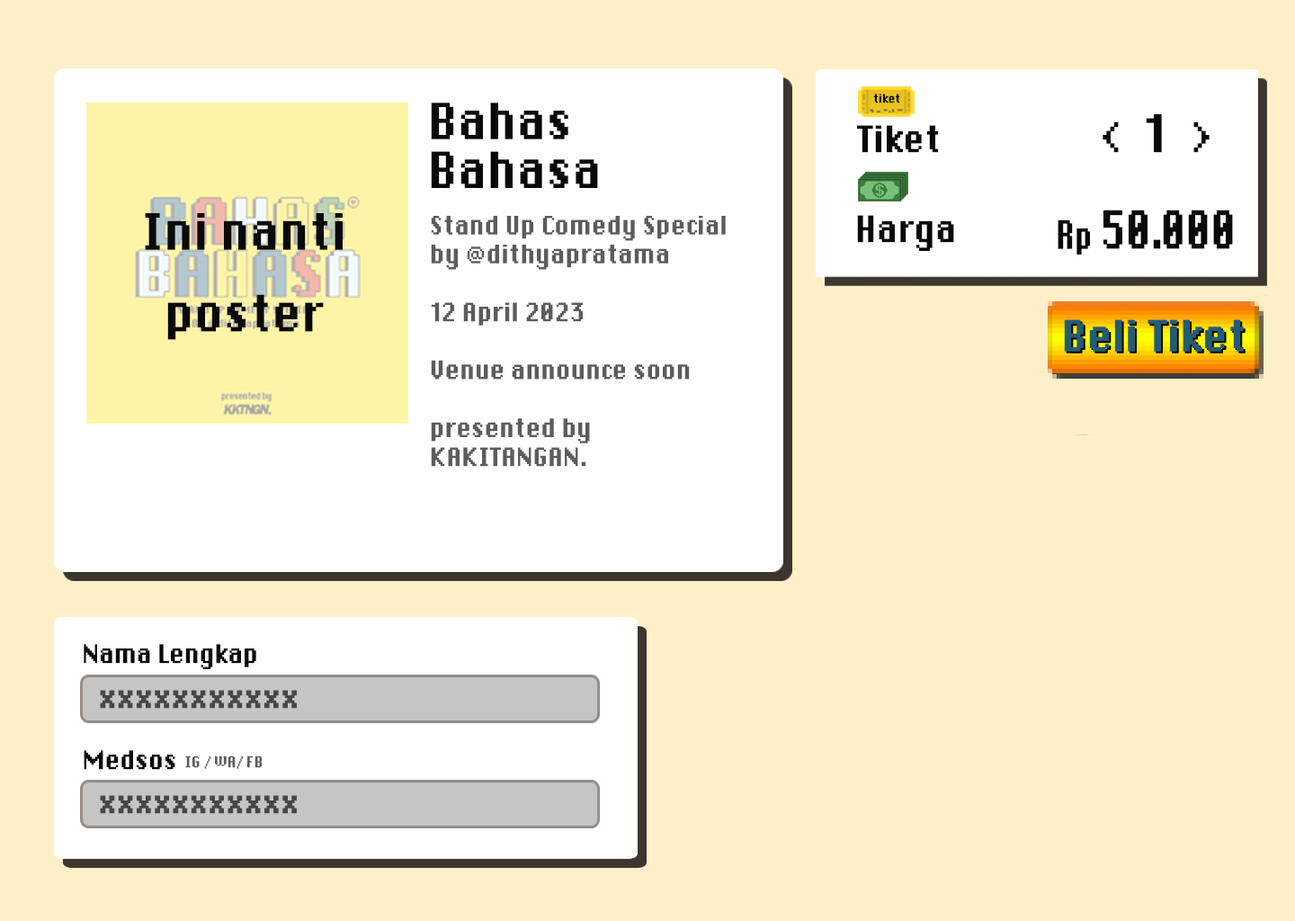
<style>
.page{position:relative;width:1295px;height:921px;background:#ffefc9}
.page>*{position:absolute;margin:0}
.t1{font:8.3px "DePixel-Bold";color:#090909;font-weight:bold;scale:0.9 1}
.t2{font:35.5px/48.8px "DePixel-Bold";color:#090909;font-weight:bold;scale:0.89 1}
.t3{font:36.9px "DePixel-Bold";color:#090909;font-weight:bold;scale:0.89 1}
.t4{font:25.7px "DePixel-Bold";color:#090909;font-weight:bold;scale:0.89 1}
.t5{font:36.8px "DePixel-Bold";color:#090909;font-weight:bold;scale:0.73 1}
.t6{font:27.6px "DePixel-Bold";color:#090909;font-weight:bold;scale:0.73 1}
.t7{font:25.2px "DePixel-Bold";color:#090909;font-weight:bold;scale:0.73 1}
.t8{font:35.5px/81.5px "DePixel-Bold";color:#090909;font-weight:bold;scale:0.89 1}
.t9{font:18px/28.9px "DePixel-Bold";color:#5c5c5c;font-weight:bold;scale:0.89 1}
.t10{font:30.1px "DePixel-Bold";color:#245c73;font-weight:bold;scale:0.9 1}
.t11{font:18.2px "DePixel-Bold";color:#090909;font-weight:bold;scale:0.89 1}
.t12{font:21.9px "DePixel-Bold";color:#474747;font-weight:bold;scale:0.89 1}
.t13{font:10.7px "DePixel-Bold";color:#5c5c5c;font-weight:bold;scale:0.89 1}
</style>
<div class="page">
<p class="t1" style="left:873px;top:94px;width:27px;height:9px">tiket</p>
<p class="t2" style="left:431px;top:103px;width:167px;height:85px">Bahas<br>Bahasa</p>
<p class="t3" style="left:857px;top:114px;width:353px;height:39px"><span class="t4">Tiket                   </span>&lt;  1  &gt;</p>
<p class="t5" style="left:1058px;top:210px;width:175px;height:44px"><span class="t6">R</span><span class="t7">p</span> 50.000</p>
<p class="t8" style="left:145px;top:213px;width:198px;height:127px;text-align:center">Ini nanti<br>poster</p>
<p class="t9" style="left:431px;top:216px;width:295px;height:251px">Stand Up Comedy Special<br>by @dithyapratama<br><br>12 April 2023<br><br>Venue announce soon<br><br>presented by<br>KAKITANGAN.</p>
<p class="t4" style="left:857px;top:215px;width:97px;height:36px">Harga</p>
<p class="t10" style="left:1064px;top:319px;width:180px;height:33px">Beli Tiket</p>
<p class="t11" style="left:84px;top:644px;width:172px;height:25px">Nama Lengkap</p>
<p class="t12" style="left:100px;top:690px;width:197px;height:19px">xxxxxxxxxxx</p>
<p class="t11" style="left:84px;top:750px;width:91px;height:20px">Medsos</p>
<p class="t13" style="left:185px;top:755px;width:78px;height:14px">IG / WA/ FB</p>
<p class="t12" style="left:100px;top:795px;width:197px;height:19px">xxxxxxxxxxx</p>
</div>
